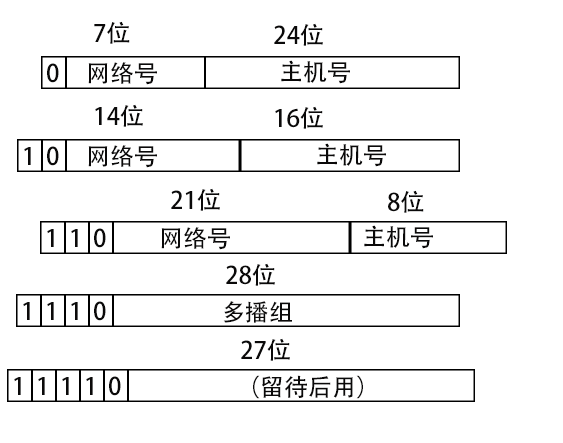
<style>
.page{position:relative;width:563px;height:443px;background:#ffffff}
.page>*{position:absolute;margin:0}
.t1{font:24px "AdobeHeitiStd-Regular";color:#0a0909}
</style>
<div class="page">
<p class="t1" style="left:94px;top:21px;width:36px;height:23px">7位</p>
<p class="t1" style="left:274px;top:23px;width:49px;height:23px">24位</p>
<p class="t1" style="left:47px;top:63px;width:12px;height:20px">0</p>
<p class="t1" style="left:88px;top:62px;width:69px;height:23px">网络号</p>
<p class="t1" style="left:281px;top:60px;width:69px;height:24px">主机号</p>
<p class="t1" style="left:95px;top:104px;width:48px;height:23px">14位</p>
<p class="t1" style="left:275px;top:106px;width:48px;height:23px">16位</p>
<p class="t1" style="left:24px;top:147px;width:7px;height:18px">1</p>
<p class="t1" style="left:47px;top:146px;width:12px;height:20px">0</p>
<p class="t1" style="left:88px;top:145px;width:69px;height:23px">网络号</p>
<p class="t1" style="left:317px;top:143px;width:69px;height:24px">主机号</p>
<p class="t1" style="left:171px;top:188px;width:49px;height:23px">21位</p>
<p class="t1" style="left:388px;top:190px;width:36px;height:23px">8位</p>
<p class="t1" style="left:47px;top:229px;width:7px;height:18px">1</p>
<p class="t1" style="left:71px;top:229px;width:7px;height:18px">1</p>
<p class="t1" style="left:94px;top:228px;width:12px;height:20px">0</p>
<p class="t1" style="left:161px;top:227px;width:69px;height:23px">网络号</p>
<p class="t1" style="left:364px;top:225px;width:69px;height:24px">主机号</p>
<p class="t1" style="left:226px;top:263px;width:49px;height:23px">28位</p>
<p class="t1" style="left:23px;top:302px;width:7px;height:18px">1</p>
<p class="t1" style="left:47px;top:302px;width:7px;height:18px">1</p>
<p class="t1" style="left:71px;top:302px;width:7px;height:18px">1</p>
<p class="t1" style="left:94px;top:301px;width:12px;height:20px">0</p>
<p class="t1" style="left:223px;top:301px;width:69px;height:22px">多播组</p>
<p class="t1" style="left:241px;top:338px;width:49px;height:23px">27位</p>
<p class="t1" style="left:14px;top:377px;width:7px;height:18px">1</p>
<p class="t1" style="left:38px;top:377px;width:7px;height:18px">1</p>
<p class="t1" style="left:62px;top:377px;width:7px;height:18px">1</p>
<p class="t1" style="left:86px;top:377px;width:7px;height:18px">1</p>
<p class="t1" style="left:109px;top:376px;width:12px;height:20px">0</p>
<p class="t1" style="left:253px;top:375px;width:110px;height:24px">（留待后用）</p>
</div>
